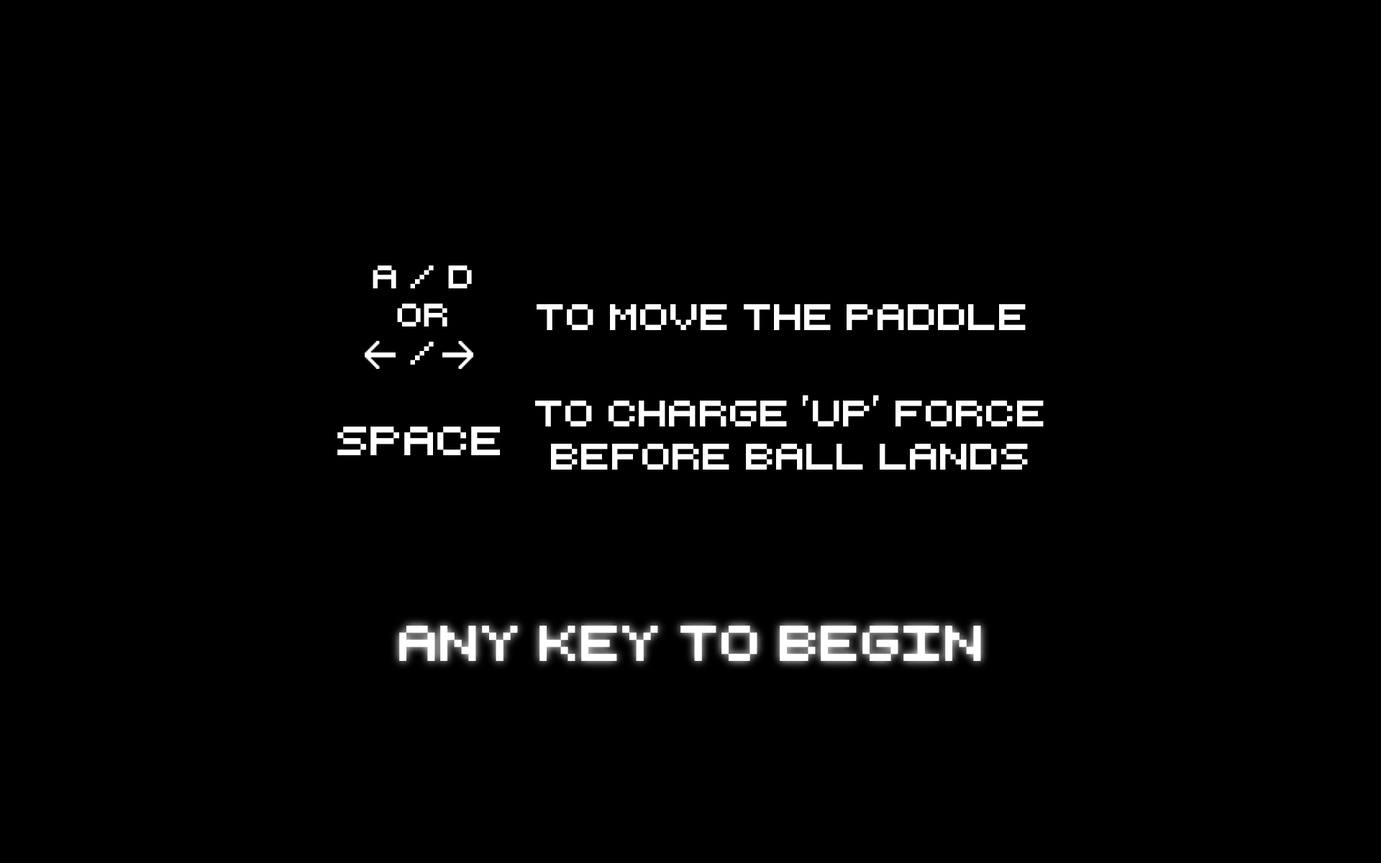
<style>
.page{position:relative;width:1381px;height:863px;background:#000000}
.page>*{position:absolute;margin:0}
.t1{font:31.7px "RetroComputer";color:#ffffff}
.t2{font:36px "RetroComputer";color:#fefefe}
.t3{font:36px "RetroComputer";color:#ffffff}
.t4{font:39.6px "RetroComputer";color:#ffffff}
.t5{font:48.9px "RetroComputer";color:#ffffff}
</style>
<div class="page">
<p class="t1" style="left:373px;top:265px;width:99px;height:100px;text-align:center">A / D<br>or<br>/</p>
<p class="t2" style="left:537px;top:304px;width:489px;height:26px">to move the paddle</p>
<p class="t3" style="left:535px;top:395px;width:509px;height:75px;text-align:center">to charge 'up' force<br>before ball lands</p>
<p class="t4" style="left:337px;top:427px;width:163px;height:28px">Space</p>
<p class="t5" style="left:399px;top:626px;width:582px;height:35px">Any Key to Begin</p>
</div>
